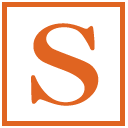
<style>
.page{position:relative;width:128px;height:128px;background:#ffffff}
.page>*{position:absolute;margin:0}
.t1{font:190px "BellMT";color:#e06421;scale:1.2 1}
</style>
<div class="page">
<p class="t1" style="left:31px;top:23px;width:68px;height:83px">s</p>
</div>
